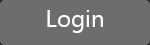
<style>
.page{position:relative;width:150px;height:45px;background:#6d6d6d}
.page>*{position:absolute;margin:0}
.t1{font:24px "LaoUI";color:#ffffff}
</style>
<div class="page">
<p class="t1" style="left:47px;top:10px;width:56px;height:23px">Login</p>
</div>
